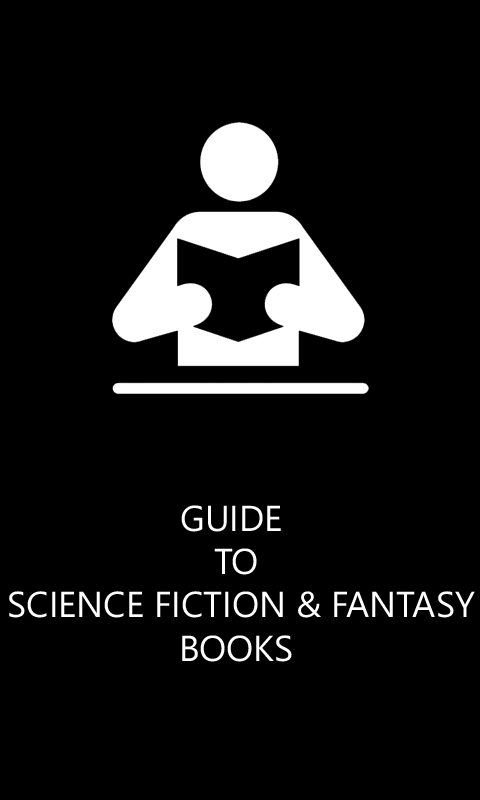
<style>
.page{position:relative;width:480px;height:800px;background:#000000}
.page>*{position:absolute;margin:0}
.t1{font:36px "SegoeWP";color:#ffffff}
</style>
<div class="page">
<p class="t1" style="left:9px;top:505px;width:466px;height:157px;text-align:center">GUIDE <br>TO<br> SCIENCE FICTION &amp; FANTASY<br>BOOKS</p>
</div>
